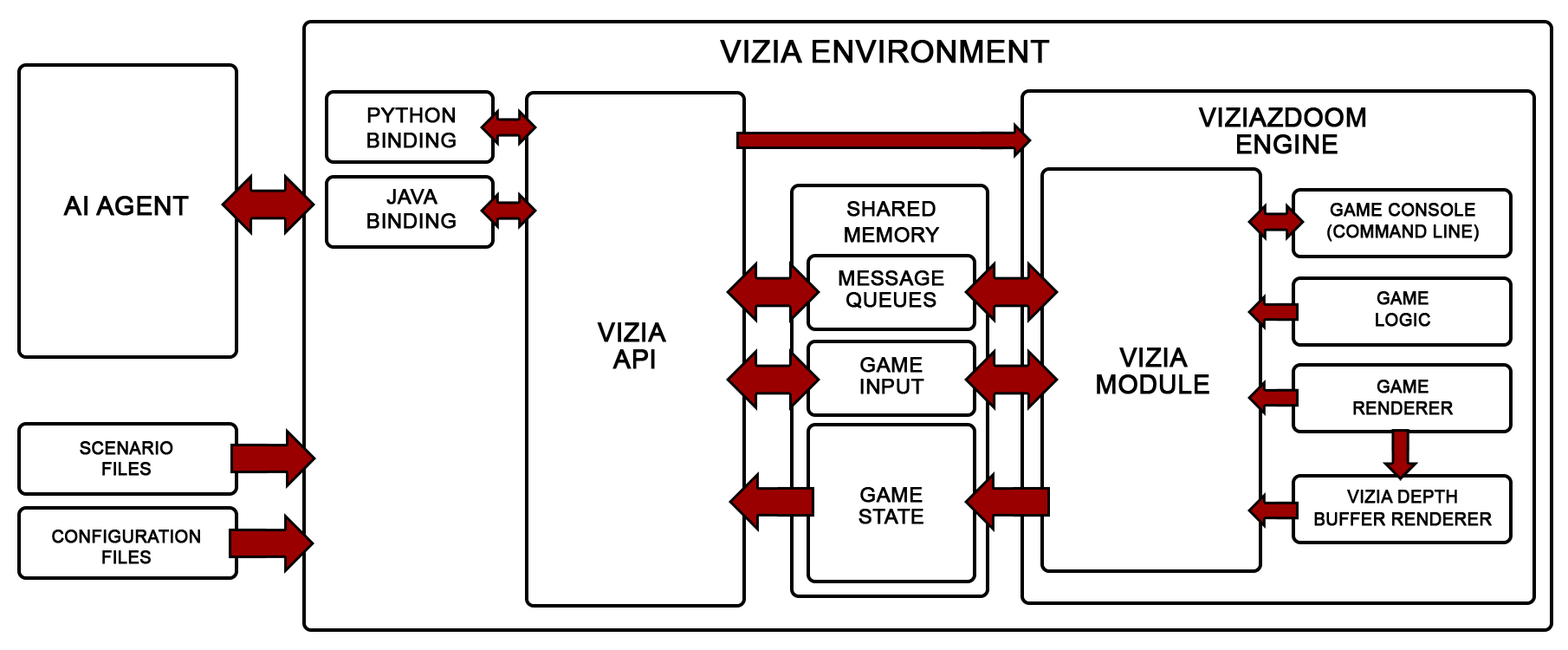
<style>
.page{position:relative;width:1568px;height:650px;background:#ffffff}
.page>*{position:absolute;margin:0}
.t1{font:31.2px "ArialMT";color:#000000;text-transform:uppercase;font-weight:bold}
.t2{font:20.8px "ArialMT";color:#000000;text-transform:uppercase;font-weight:bold}
.t3{font:26px/26.5px "ArialMT";color:#000000;text-transform:uppercase;font-weight:bold}
.t4{font:26px "ArialMT";color:#000000;text-transform:uppercase;font-weight:bold}
.t5{font:20.8px/21.7px "ArialMT";color:#000000;text-transform:uppercase;font-weight:bold}
.t6{font:20.8px/26.5px "ArialMT";color:#000000;text-transform:uppercase;font-weight:bold}
.t7{font:17.3px/22.1px "ArialMT";color:#000000;text-transform:uppercase;font-weight:bold}
.t8{font:17.3px "ArialMT";color:#000000;text-transform:uppercase;font-weight:bold}
</style>
<div class="page">
<p class="t1" style="left:720px;top:40px;width:330px;height:23px">vizia environment</p>
<p class="t2" style="left:367px;top:107px;width:89px;height:122px;text-align:center">PYTHON<br>BINDING<br><br>JAVA<br>BINDING</p>
<p class="t3" style="left:1198px;top:107px;width:168px;height:47px;text-align:center">viziaZdoom <br>ENGINE</p>
<p class="t4" style="left:63px;top:196px;width:126px;height:20px">ai agent</p>
<p class="t5" style="left:839px;top:201px;width:105px;height:323px;text-align:center"><span class="t6">SHARED<br>MEMORY<br></span><br>message<br>queueS<br><br><br>GAME<br>INPUT<br><br><br><br><br>GAME<br>STATE</p>
<p class="t7" style="left:1314px;top:203px;width:178px;height:323px;text-align:center">GAME CONSOLE<br>(COMMAND LINE)<br><br><br>GAME<br>LOGIC<br><br><br>GAME<br>RENDERER<br><br><br><br>VIZIA DEPTH<br>BUFFER RENDERER</p>
<p class="t3" style="left:597px;top:322px;width:69px;height:47px;text-align:center">vizia <br>api</p>
<p class="t3" style="left:1097px;top:347px;width:112px;height:47px;text-align:center">VIZIA<br>MODULE</p>
<p class="t8" style="left:52px;top:441px;width:148px;height:123px;text-align:center">scenario<br>FILES<br><br><br>CONFIGURATION<br>FILES</p>
</div>
